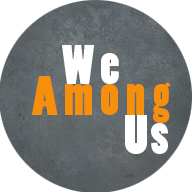
<style>
.page{position:relative;width:192px;height:192px;background:#ffffff}
.page>*{position:absolute;margin:0}
.t1{font:51.7px "PoplarStd";letter-spacing:0.135em;color:#ffffff}
.t2{font:51.7px/45.9px "PoplarStd";letter-spacing:0.135em;color:#f68f0c}
.t3{font:51.7px/46.5px "PoplarStd";letter-spacing:0.135em;color:#ffffff}
.t4{font:51.7px/39px "PoplarStd";letter-spacing:0.063em;color:#ffffff}
</style>
<div class="page">
<p class="t1" style="left:62px;top:45px;width:57px;height:39px">We</p>
<p class="t2" style="left:32px;top:76px;width:139px;height:78px;text-align:right"><span class="t3"><br></span>Among<br><span class="t4">Us</span></p>
</div>
